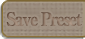
<style>
.page{position:relative;width:85px;height:39px}
.page>*{position:absolute;margin:0}
.t1{font:18px "RyuminPro-ExBold";letter-spacing:-0.12em;color:#8e7767;font-weight:bold;scale:0.9 1}
</style>
<div class="page">
<p class="t1" style="left:6px;top:12px;width:76px;height:14px">Save Preset</p>
</div>
